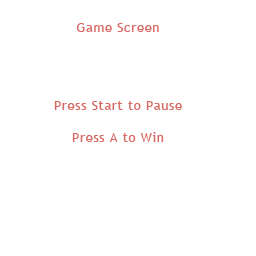
<style>
.page{position:relative;width:256px;height:256px;background:#ffffff}
.page>*{position:absolute;margin:0}
.t1{font:13px "TrebuchetMS";letter-spacing:0.05em;color:#d86a65}
</style>
<div class="page">
<p class="t1" style="left:76px;top:23px;width:83px;height:9px">Game Screen</p>
<p class="t1" style="left:54px;top:101px;width:128px;height:9px">Press Start to Pause</p>
<p class="t1" style="left:72px;top:132px;width:92px;height:10px">Press A to Win</p>
</div>
